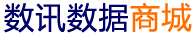
<style>
.page{position:relative;width:195px;height:36px;background:#ffffff}
.page>*{position:absolute;margin:0}
.t1{font:30px "MicrosoftYaHei";letter-spacing:0.05em;color:#000069}
.t2{font:30px "MicrosoftYaHei";letter-spacing:0.05em;color:#ff6c00}
</style>
<div class="page">
<p class="t1" style="left:4px;top:2px;width:188px;height:31px">数讯数据<span class="t2">商城</span></p>
</div>
